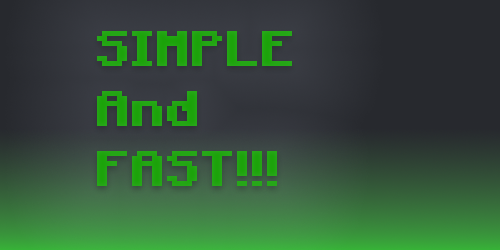
<style>
.page{position:relative;width:500px;height:250px}
.page>*{position:absolute;margin:0}
.t1{font:50px "Minecraft-Bold";color:#21a512}
</style>
<div class="page">
<p class="t1" style="left:97px;top:31px;width:195px;height:155px">SIMPLE<br>And<br>FAST!!!</p>
</div>
